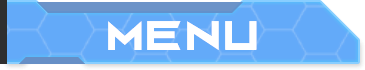
<style>
.page{position:relative;width:365px;height:70px;background:#63aaf9}
.page>*{position:absolute;margin:0}
.t1{font:45.3px "QORE";color:#ffffff}
</style>
<div class="page">
<p class="t1" style="left:108px;top:21px;width:149px;height:29px">MENU</p>
</div>
